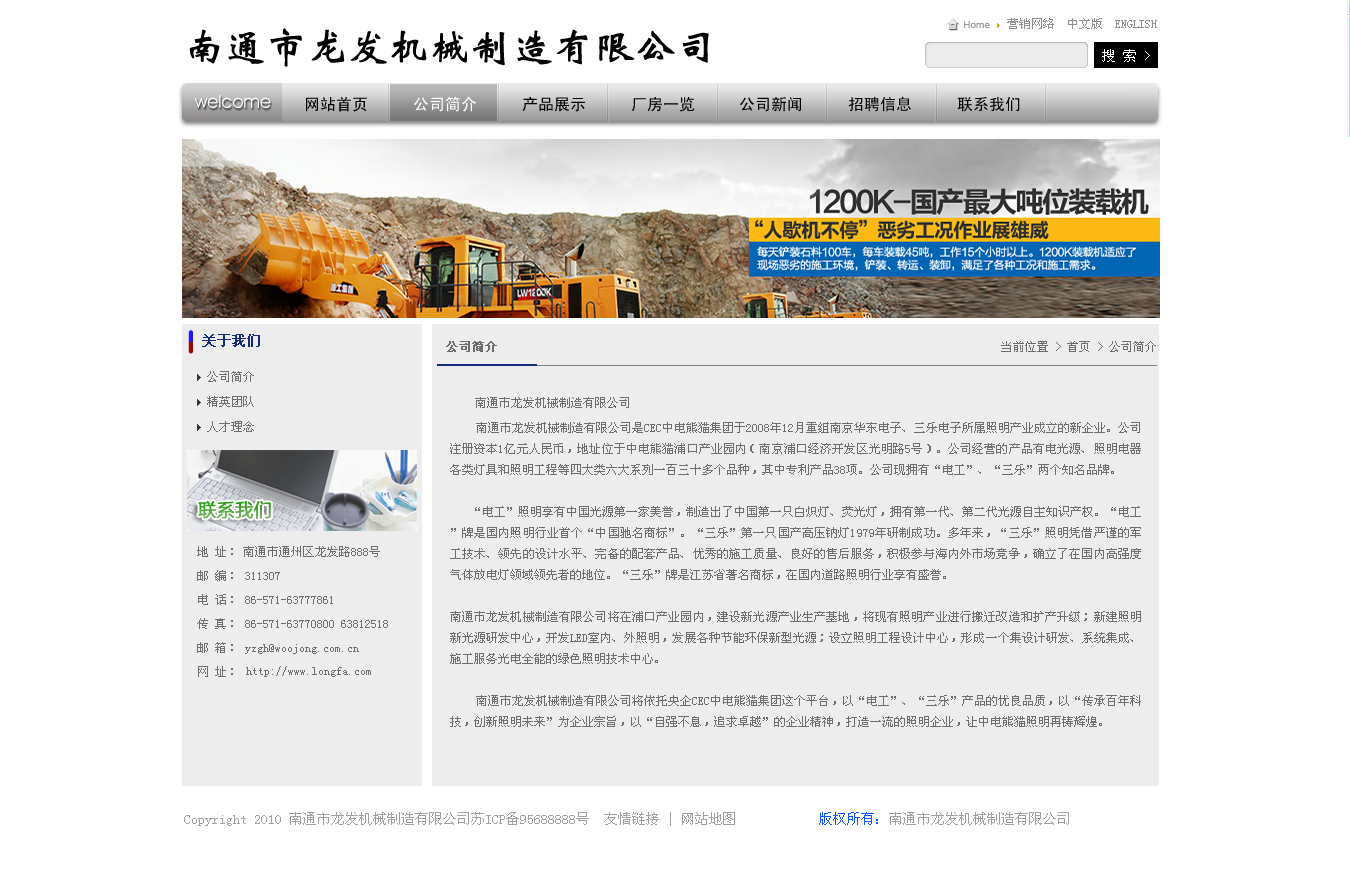
<style>
.page{position:relative;width:1350px;height:876px;background:#ffffff}
.page>*{position:absolute;margin:0}
.t1{font:40px "STXinwei";color:#000000;font-weight:bold}
.t2{font:14px "SimSun";color:#ffffff}
.t3{font:18px "AvantGardeITCbyBT-Book";color:#ffffff}
.t4{font:16px "SimHei";color:#000000}
.t5{font:16px "SimHei";color:#ffffff}
.t6{font:14px "SimSun";color:#142a7d;font-weight:bold}
.t7{font:12px "SimSun";color:#6e6e6e;font-weight:bold}
.t8{font:12px "SimSun";color:#6e6e6e}
.t9{font:14px "SimSun";color:#a4a0a0}
.t10{font:14px "SimSun";color:#1058fd}
</style>
<div class="page">
<p class="t1" style="left:189px;top:28px;width:520px;height:39px">南通市龙发机械制造有限公司</p>
<p class="t2" style="left:1102px;top:49px;width:48px;height:13px">搜 索 &gt;</p>
<p class="t3" style="left:194px;top:95px;width:77px;height:13px">welcome</p>
<p class="t4" style="left:306px;top:97px;width:61px;height:15px">网站首页</p>
<p class="t5" style="left:414px;top:96px;width:63px;height:16px">公司简介</p>
<p class="t5" style="left:414px;top:96px;width:63px;height:16px">公司简介</p>
<p class="t4" style="left:522px;top:96px;width:63px;height:16px">产品展示</p>
<p class="t4" style="left:632px;top:96px;width:63px;height:16px">厂房一览</p>
<p class="t4" style="left:740px;top:97px;width:61px;height:15px">公司新闻</p>
<p class="t4" style="left:848px;top:96px;width:63px;height:16px">招聘信息</p>
<p class="t4" style="left:957px;top:97px;width:63px;height:15px">联系我们</p>
<p class="t6" style="left:202px;top:334px;width:58px;height:13px">关于我们</p>
<p class="t7" style="left:446px;top:341px;width:51px;height:11px">公司简介</p>
<p class="t8" style="left:1001px;top:341px;width:155px;height:11px">当前位置 &gt; 首页 &gt; 公司简介</p>
<p class="t8" style="left:475px;top:397px;width:154px;height:11px">南通市龙发机械制造有限公司</p>
<p class="t8" style="left:450px;top:422px;width:691px;height:305px;text-align:justify">南通市龙发机械制造有限公司是CEC中电熊猫集团于2008年12月重组南京华东电子、三乐电子所属照明产业成立的新企业。公司注册资本1亿元人民币，地址位于中电熊猫浦口产业园内（南京浦口经济开发区光明路5号）。公司经营的产品有电光源、照明电器各类灯具和照明工程等四大类六大系列一百三十多个品种，其中专利产品38项。公司现拥有“电工”、“三乐”两个知名品牌。<br><br>  “电工”照明享有中国光源第一家美誉，制造出了中国第一只白炽灯、荧光灯，拥有第一代、第二代光源自主知识产权。“电工”牌是国内照明行业首个“中国驰名商标”。“三乐”第一只国产高压钠灯1979年研制成功。多年来，“三乐”照明凭借严谨的军工技术、领先的设计水平、完备的配套产品、优秀的施工质量、良好的售后服务，积极参与海内外市场竞争，确立了在国内高强度气体放电灯领域领先者的地位。“三乐”牌是江苏省著名商标，在国内道路照明行业享有盛誉。<br><br>南通市龙发机械制造有限公司将在浦口产业园内，建设新光源产业生产基地，将现有照明产业进行搬迁改造和扩产升级；新建照明新光源研发中心，开发LED室内、外照明，发展各种节能环保新型光源；设立照明工程设计中心，形成一个集设计研发、系统集成、施工服务光电全能的绿色照明技术中心。<br><br>   南通市龙发机械制造有限公司将依托央企CEC中电熊猫集团这个平台，以“电工”、“三乐”产品的优良品质，以“传承百年科技，创新照明未来”为企业宗旨，以“自强不息，追求卓越”的企业精神，打造一流的照明企业，让中电熊猫照明再铸辉煌。</p>
<p class="t8" style="left:243px;top:546px;width:137px;height:11px">南通市通州区龙发路888号</p>
<p class="t8" style="left:246px;top:666px;width:125px;height:11px">http://www.longfa.com</p>
<p class="t9" style="left:184px;top:812px;width:551px;height:14px">Copyright 2010 南通市龙发机械制造有限公司苏ICP备95688888号  友情链接 | 网站地图</p>
<p class="t9" style="left:819px;top:812px;width:250px;height:13px"><span class="t10">版权所有：</span>南通市龙发机械制造有限公司</p>
</div>
